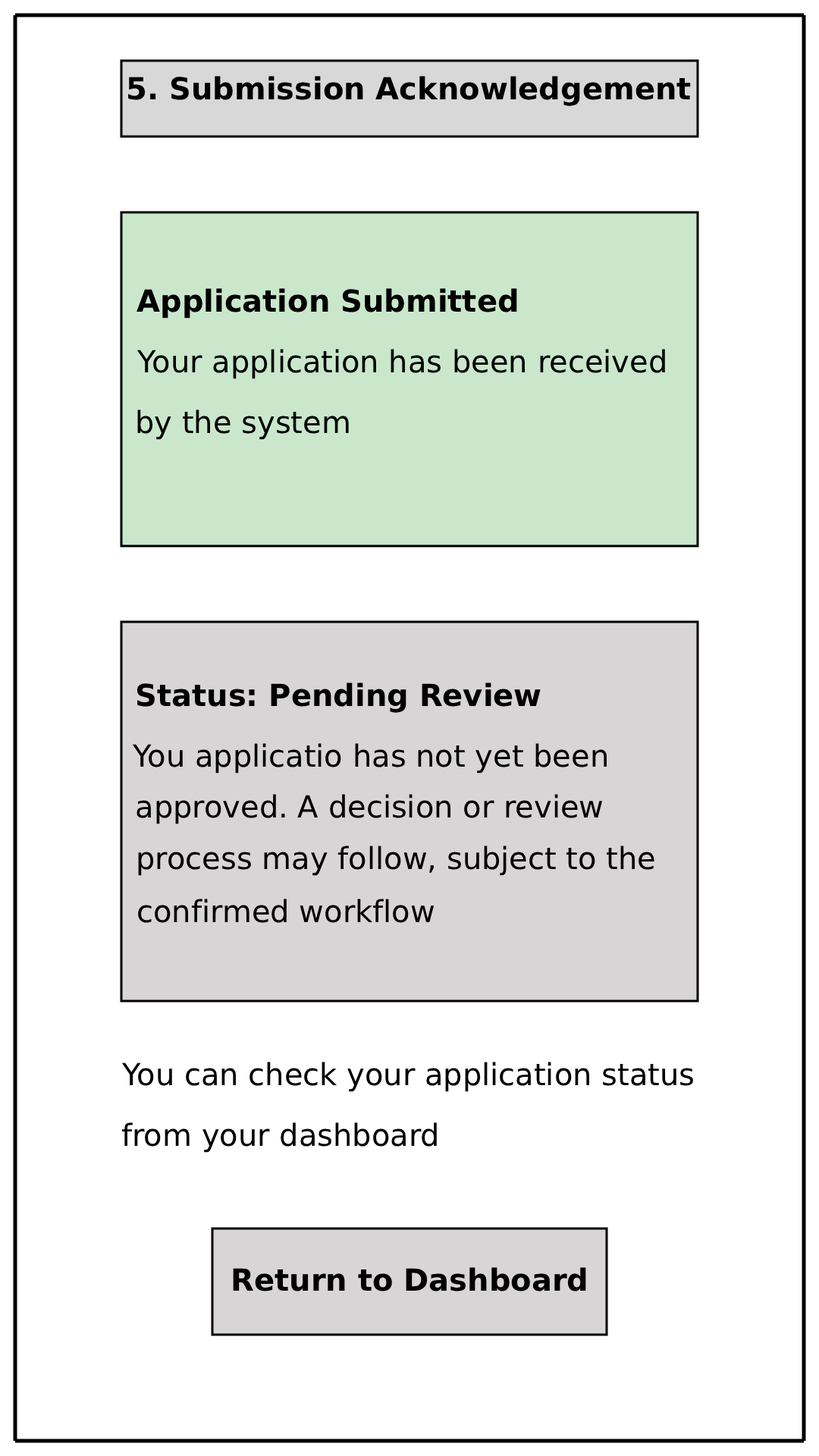
<style>
.page{position:relative;width:819px;height:1456px;background:#ffffff}
.page>*{position:absolute;margin:0}
.t1{font:30.3px "DejaVuSans-Bold";color:#000000}
.t2{font:30.3px "DejaVuSans";color:#000000}
</style>
<div class="page">
<p class="t1" style="left:128px;top:76px;width:563px;height:30px">5. Submission Acknowledgement</p>
<p class="t1" style="left:136px;top:288px;width:381px;height:30px">Application Submitted</p>
<p class="t2" style="left:136px;top:349px;width:529px;height:30px">Your application has been received</p>
<p class="t2" style="left:137px;top:409px;width:212px;height:31px">by the system</p>
<p class="t1" style="left:136px;top:682px;width:405px;height:31px">Status: Pending Review</p>
<p class="t2" style="left:132px;top:743px;width:475px;height:30px">You applicatio has not yet been</p>
<p class="t2" style="left:136px;top:794px;width:467px;height:30px">approved. A decision or review</p>
<p class="t2" style="left:138px;top:846px;width:516px;height:30px">process may follow, subject to the</p>
<p class="t2" style="left:138px;top:899px;width:297px;height:24px">confirmed workflow</p>
<p class="t2" style="left:121px;top:1062px;width:572px;height:30px">You can check your application status</p>
<p class="t2" style="left:121px;top:1122px;width:316px;height:31px">from your dashboard</p>
<p class="t1" style="left:233px;top:1267px;width:353px;height:24px">Return to Dashboard</p>
</div>
